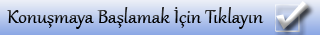
<style>
.page{position:relative;width:320px;height:35px}
.page>*{position:absolute;margin:0}
.t1{font:24px "Gabriola";color:#000000}
</style>
<div class="page">
<p class="t1" style="left:7px;top:7px;width:257px;height:22px">Konuşmaya Başlamak İçin Tıklayın</p>
</div>
